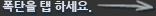
<style>
.page{position:relative;width:156px;height:16px;background:#333333}
.page>*{position:absolute;margin:0}
.t1{font:12px "NanumGothicExtraBold";color:#dee1e7}
</style>
<div class="page">
<p class="t1" style="left:2px;top:0px;width:90px;height:12px">폭탄을 탭 하세요.</p>
</div>
